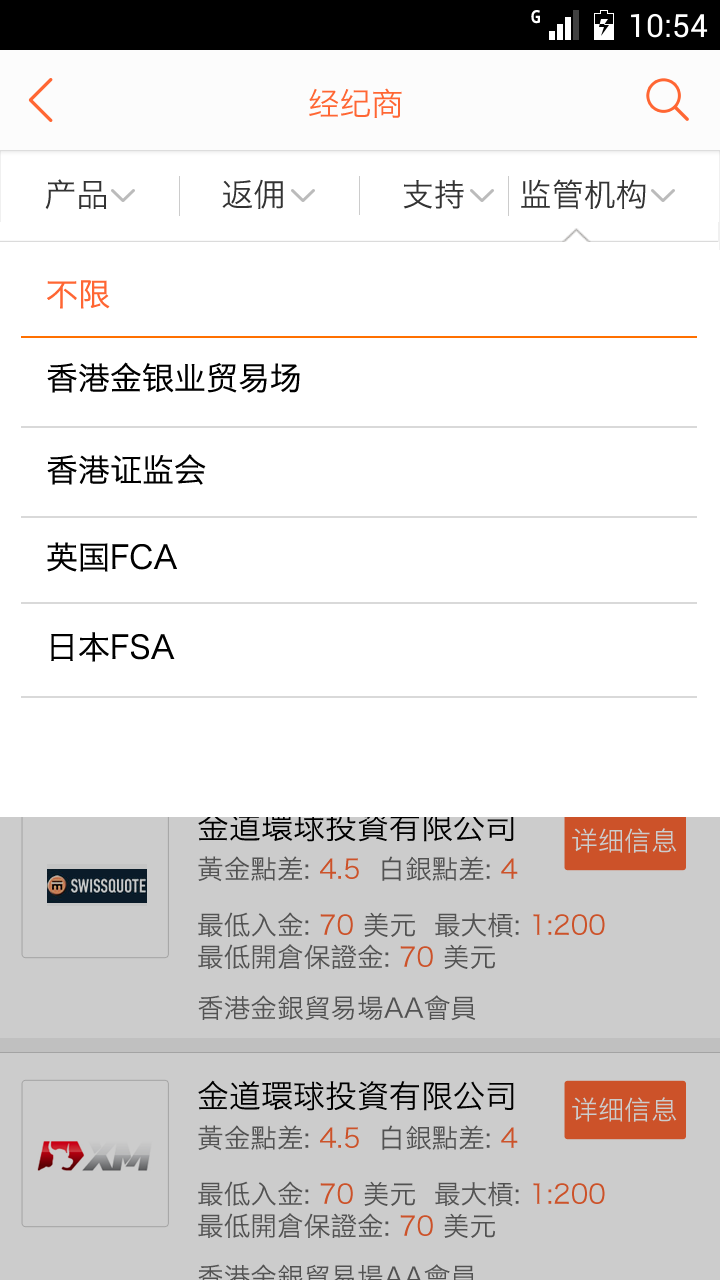
<style>
.page{position:relative;width:720px;height:1280px;background:#ffffff}
.page>*{position:absolute;margin:0}
.t1{font:32px "HiraginoSansGB-W3";color:#ff6633}
.t2{font:32px "HiraginoSansGB-W3";color:#333333}
.t3{font:32px "HiraginoSansGB-W3";color:#000000}
.t4{font:26.7px "HiraginoSansGB-W3";color:#cccccc}
.t5{font:26.7px "HiraginoSansGB-W3";color:#666666}
.t6{font:26.7px "HiraginoSansGB-W3";color:#ff6633}
</style>
<div class="page">
<p class="t1" style="left:309px;top:88px;width:93px;height:30px">经纪商</p>
<p class="t2" style="left:45px;top:179px;width:62px;height:31px">产品</p>
<p class="t2" style="left:222px;top:179px;width:61px;height:30px">返佣</p>
<p class="t2" style="left:403px;top:180px;width:61px;height:29px">支持</p>
<p class="t2" style="left:521px;top:179px;width:125px;height:30px">监管机构</p>
<p class="t1" style="left:47px;top:280px;width:63px;height:29px">不限</p>
<p class="t3" style="left:47px;top:362px;width:253px;height:31px">香港金银业贸易场</p>
<p class="t3" style="left:47px;top:454px;width:159px;height:31px">香港证监会</p>
<p class="t3" style="left:47px;top:542px;width:130px;height:30px">英国FCA</p>
<p class="t3" style="left:51px;top:632px;width:124px;height:30px">日本FSA</p>
<p class="t3" style="left:198px;top:811px;width:316px;height:31px">金道環球投資有限公司</p>
<p class="t4" style="left:572px;top:828px;width:105px;height:25px">详细信息</p>
<p class="t5" style="left:198px;top:856px;width:320px;height:26px">黃金點差: <span class="t6">4.5</span>  白銀點差: <span class="t6">4</span></p>
<p class="t5" style="left:198px;top:912px;width:407px;height:57px">最低入金: <span class="t6">70 </span>美元  最大槓: <span class="t6">1:200</span> <br>最低開倉保證金: <span class="t6">70 </span>美元</p>
<p class="t5" style="left:198px;top:995px;width:278px;height:26px">香港金銀貿易場AA會員</p>
<p class="t3" style="left:198px;top:1080px;width:316px;height:31px">金道環球投資有限公司</p>
<p class="t4" style="left:572px;top:1097px;width:105px;height:25px">详细信息</p>
<p class="t5" style="left:198px;top:1125px;width:320px;height:26px">黃金點差: <span class="t6">4.5</span>  白銀點差: <span class="t6">4</span></p>
<p class="t5" style="left:198px;top:1181px;width:407px;height:57px">最低入金: <span class="t6">70 </span>美元  最大槓: <span class="t6">1:200</span> <br>最低開倉保證金: <span class="t6">70 </span>美元</p>
</div>
